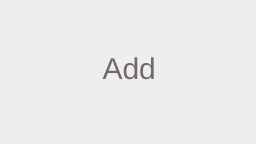
<style>
.page{position:relative;width:256px;height:144px;background:#eeeeee}
.page>*{position:absolute;margin:0}
.t1{font:30px "LiberationSans";color:#72676a}
</style>
<div class="page">
<p class="t1" style="left:102px;top:57px;width:52px;height:23px">Add</p>
</div>
